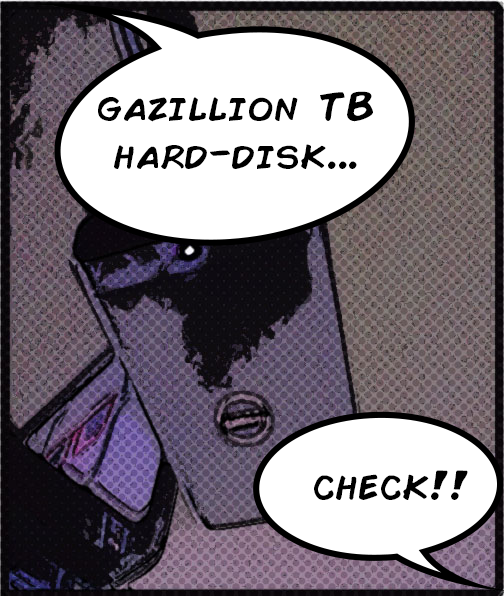
<style>
.page{position:relative;width:504px;height:596px;background:#ffffff}
.page>*{position:absolute;margin:0}
.t1{font:40px "ComicBook";color:#000000}
.t2{font:41.1px "ComicBook";color:#000000}
</style>
<div class="page">
<p class="t1" style="left:98px;top:91px;width:275px;height:78px;text-align:center">gazillion TB<br>hard-disk...</p>
<p class="t2" style="left:314px;top:470px;width:154px;height:30px">check!!</p>
</div>
